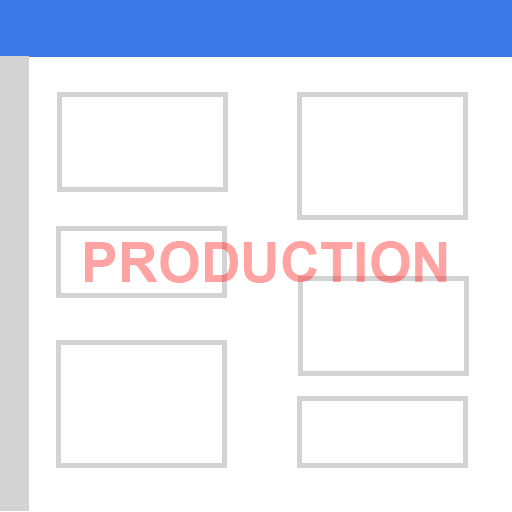
<style>
.page{position:relative;width:512px;height:512px;background:#ffffff}
.page>*{position:absolute;margin:0}
.t1{font:55px "Arial-BoldMT";color:#ffa3a3}
</style>
<div class="page">
<p class="t1" style="left:85px;top:241px;width:362px;height:42px">PRODUCTION</p>
</div>
